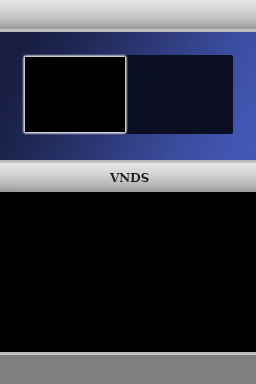
<style>
.page{position:relative;width:256px;height:384px;background:#000000}
.page>*{position:absolute;margin:0}
.t1{font:12px "BitstreamVeraSerif-Bold";color:#202020}
</style>
<div class="page">
<p class="t1" style="left:109px;top:173px;width:40px;height:9px">VNDS</p>
</div>
